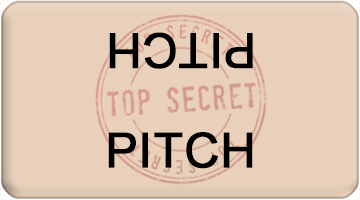
<style>
.page{position:relative;width:360px;height:200px;background:#e8d0bb}
.page>*{position:absolute;margin:0}
.t1{font:48px "ArialMT";color:#000000;font-weight:bold}
</style>
<div class="page">
<p class="t1" style="left:109px;top:32px;width:144px;height:37px;rotate:180deg">PITCH</p>
<p class="t1" style="left:108px;top:132px;width:145px;height:37px">PITCH</p>
</div>
